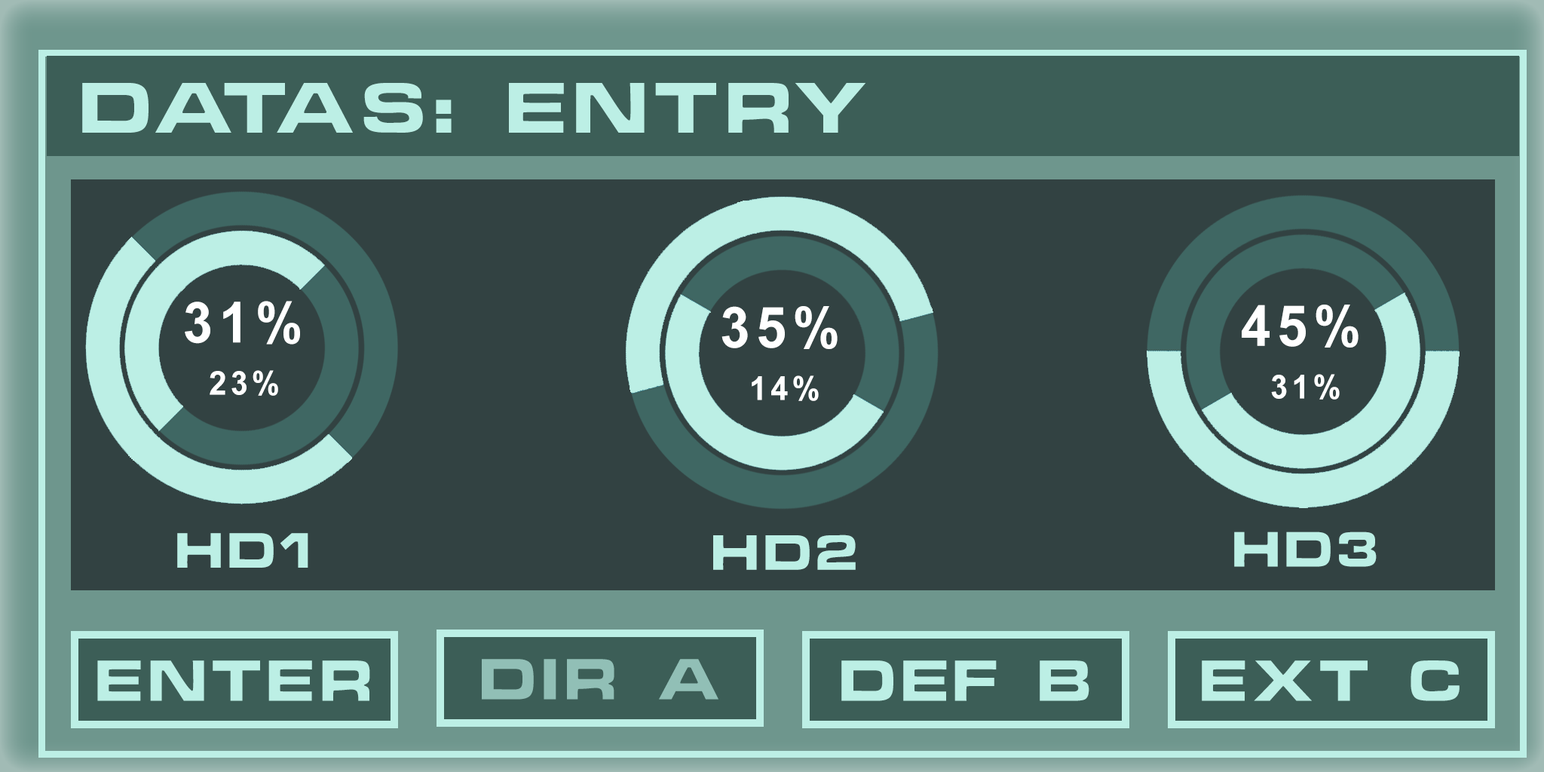
<style>
.page{position:relative;width:1544px;height:772px;background:#324242}
.page>*{position:absolute;margin:0}
.t1{font:65.4px "ChinoCapsSSK";letter-spacing:0.12em;color:#bcefe5}
.t2{font:56.5px "Arial-BoldMT";letter-spacing:0.12em;color:#ffffff;scale:0.96 1}
.t3{font:33px "Arial-BoldMT";letter-spacing:0.12em;color:#ffffff;scale:0.96 1}
.t4{font:45.2px "ChinoCapsSSK";letter-spacing:0.12em;color:#bcefe5;scale:0.96 1}
.t5{font:52.8px "ChinoCapsSSK";letter-spacing:0.12em;color:#bcefe5}
.t6{font:52.8px "ChinoCapsSSK";letter-spacing:0.12em;color:#91bfb6}
</style>
<div class="page">
<p class="t1" style="left:82px;top:83px;width:784px;height:50px">DATAS: ENTRY</p>
<p class="t2" style="left:185px;top:301px;width:115px;height:44px">31%</p>
<p class="t2" style="left:1242px;top:305px;width:117px;height:43px">45%</p>
<p class="t2" style="left:722px;top:306px;width:116px;height:43px">35%</p>
<p class="t3" style="left:210px;top:370px;width:68px;height:26px">23%</p>
<p class="t3" style="left:752px;top:376px;width:67px;height:25px">14%</p>
<p class="t3" style="left:1271px;top:374px;width:69px;height:26px">31%</p>
<p class="t4" style="left:177px;top:533px;width:131px;height:35px">HD1</p>
<p class="t4" style="left:1234px;top:532px;width:143px;height:35px">HD3</p>
<p class="t4" style="left:713px;top:535px;width:143px;height:35px">HD2</p>
<p class="t5" style="left:97px;top:661px;width:273px;height:40px">ENTER</p>
<p class="t6" style="left:482px;top:659px;width:237px;height:41px">DIR A</p>
<p class="t5" style="left:842px;top:661px;width:248px;height:40px">DEF B</p>
<p class="t5" style="left:1202px;top:661px;width:258px;height:40px">EXT C</p>
</div>
